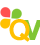
<style>
.page{position:relative;width:40px;height:45px;background:#ffffff}
.page>*{position:absolute;margin:0}
.t1{font:32.1px "Raavi-Bold";color:#ffc000}
</style>
<div class="page">
<p class="t1" style="left:9px;top:19px;width:21px;height:23px">Q</p>
</div>
